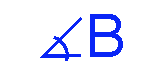
<style>
.page{position:relative;width:160px;height:75px;background:#ffffff}
.page>*{position:absolute;margin:0}
.t1{font:60px "MTExtraTiger";color:#0925f6}
.t2{font:60px "Helvetica";color:#0925f6}
</style>
<div class="page">
<p class="t1" style="left:40px;top:14px;width:83px;height:47px">R<span class="t2">B</span></p>
</div>
